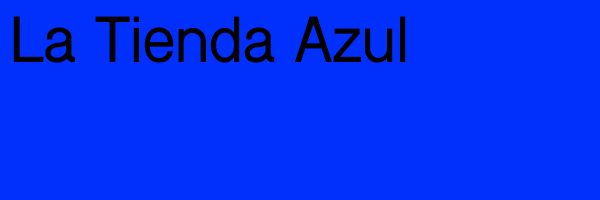
<style>
.page{position:relative;width:600px;height:200px;background:#0130fd}
.page>*{position:absolute;margin:0}
.t1{font:60px "ShreeDev0714-Bold";color:#000000}
</style>
<div class="page">
<p class="t1" style="left:13px;top:16px;width:393px;height:47px">La Tienda Azul</p>
</div>
